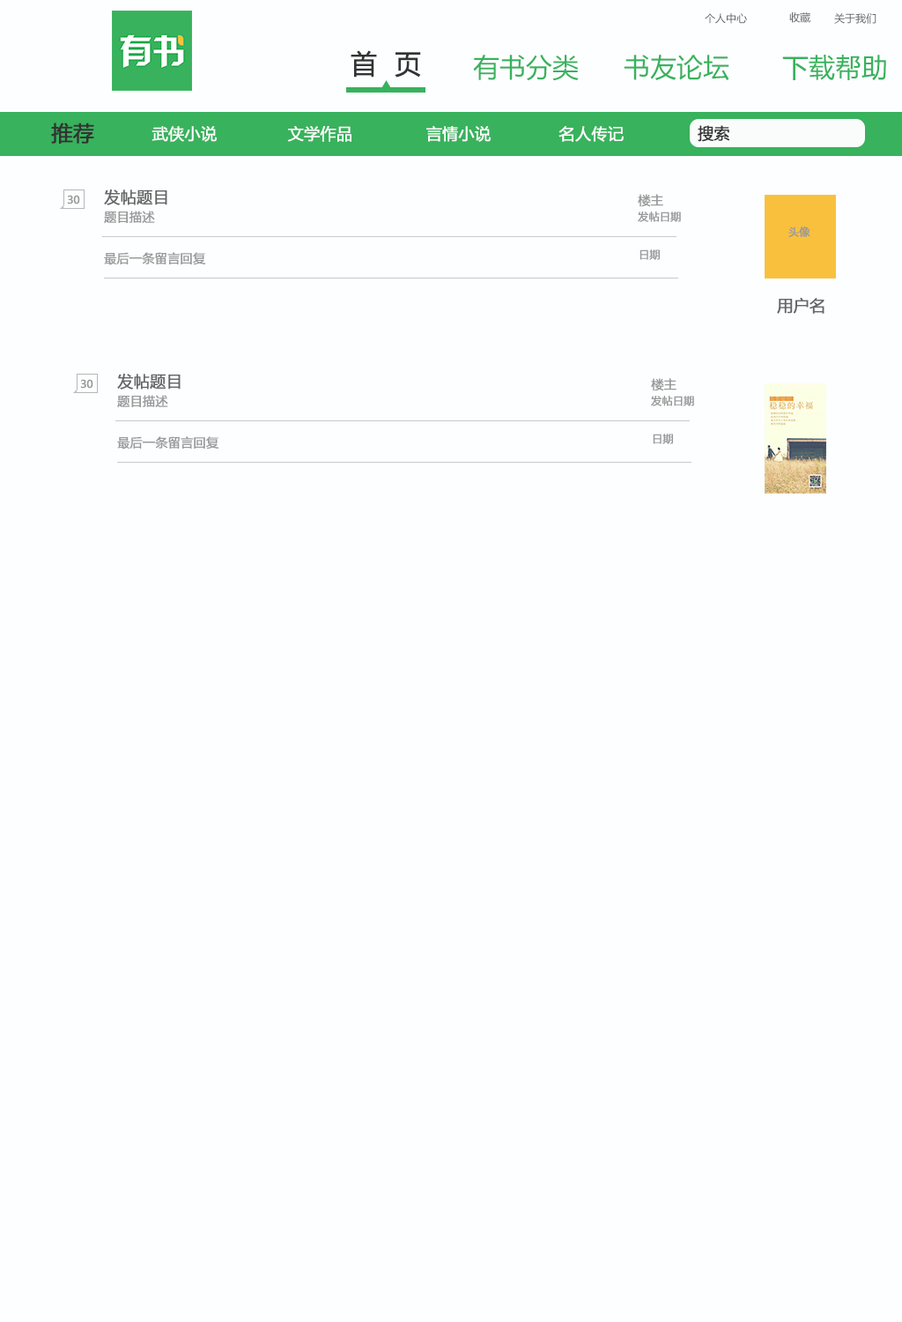
<style>
.page{position:relative;width:902px;height:1322px;background:#fdfeff}
.page>*{position:absolute;margin:0}
.t1{font:10.6px "MicrosoftYaHei";color:#666666}
.t2{font:26.4px "MicrosoftYaHei";color:#333333;font-weight:bold}
.t3{font:26.4px "MicrosoftYaHei";color:#38b25d}
.t4{font:21.1px "MicrosoftYaHei";color:#333333;font-weight:bold}
.t5{font:15.9px "MicrosoftYaHei";color:#fefdfd;font-weight:bold}
.t6{font:15.9px "MicrosoftYaHei";color:#333333;font-weight:bold}
.t7{font:10.6px "MicrosoftYaHei";color:#999999;font-weight:bold}
.t8{font:15.9px "MicrosoftYaHei";color:#666666;font-weight:bold}
.t9{font:12.3px "MicrosoftYaHei";color:#999999;font-weight:bold}
</style>
<div class="page">
<p class="t1" style="left:705px;top:13px;width:42px;height:11px">个人中心</p>
<p class="t1" style="left:789px;top:12px;width:22px;height:11px">收藏</p>
<p class="t1" style="left:834px;top:13px;width:43px;height:11px">关于我们</p>
<p class="t2" style="left:351px;top:50px;width:70px;height:28px">首  页</p>
<p class="t3" style="left:473px;top:55px;width:106px;height:26px">有书分类</p>
<p class="t3" style="left:624px;top:55px;width:106px;height:25px">书友论坛</p>
<p class="t3" style="left:782px;top:55px;width:104px;height:25px">下载帮助</p>
<p class="t4" style="left:51px;top:122px;width:43px;height:22px">推荐</p>
<p class="t5" style="left:152px;top:126px;width:65px;height:16px">武侠小说</p>
<p class="t5" style="left:287px;top:126px;width:65px;height:16px">文学作品</p>
<p class="t5" style="left:426px;top:126px;width:65px;height:16px">言情小说</p>
<p class="t5" style="left:559px;top:126px;width:65px;height:16px">名人传记</p>
<p class="t6" style="left:698px;top:125px;width:32px;height:17px">搜索</p>
<p class="t7" style="left:67px;top:195px;width:13px;height:9px">30</p>
<p class="t8" style="left:104px;top:189px;width:63px;height:16px">发帖题目</p>
<p class="t9" style="left:638px;top:194px;width:25px;height:13px">楼主</p>
<p class="t9" style="left:104px;top:211px;width:51px;height:13px">题目描述</p>
<p class="t7" style="left:638px;top:211px;width:43px;height:11px">发帖日期</p>
<p class="t7" style="left:789px;top:226px;width:22px;height:11px">头像</p>
<p class="t9" style="left:104px;top:252px;width:102px;height:13px">最后一条留言回复</p>
<p class="t7" style="left:640px;top:249px;width:20px;height:11px">日期</p>
<p class="t8" style="left:777px;top:297px;width:48px;height:17px">用户名</p>
<p class="t8" style="left:117px;top:374px;width:64px;height:15px">发帖题目</p>
<p class="t9" style="left:651px;top:378px;width:26px;height:13px">楼主</p>
<p class="t7" style="left:80px;top:379px;width:13px;height:10px">30</p>
<p class="t9" style="left:117px;top:395px;width:51px;height:13px">题目描述</p>
<p class="t7" style="left:651px;top:396px;width:43px;height:10px">发帖日期</p>
<p class="t9" style="left:117px;top:436px;width:102px;height:13px">最后一条留言回复</p>
<p class="t7" style="left:653px;top:433px;width:20px;height:11px">日期</p>
</div>
